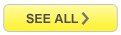
<style>
.page{position:relative;width:121px;height:35px;background:#ffffff}
.page>*{position:absolute;margin:0}
.t1{font:12.5px "Arial-BoldMT";color:#4d4d4f}
</style>
<div class="page">
<p class="t1" style="left:26px;top:13px;width:52px;height:11px">SEE ALL</p>
</div>
